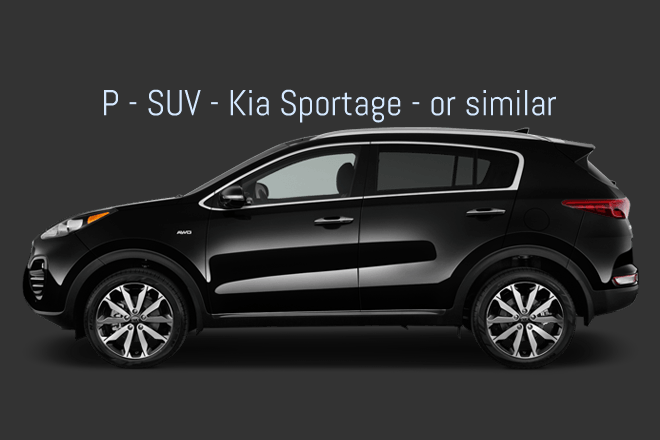
<style>
.page{position:relative;width:660px;height:440px;background:#333333}
.page>*{position:absolute;margin:0}
.t1{font:36px "Abel-Regular";color:#d5e9ff}
</style>
<div class="page">
<p class="t1" style="left:103px;top:89px;width:454px;height:34px">P - SUV - Kia Sportage - or similar</p>
</div>
